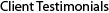
<style>
.page{position:relative;width:109px;height:13px;background:#ffffff}
.page>*{position:absolute;margin:0}
.t1{font:14px "MyriadPro-Regular";color:#000000}
</style>
<div class="page">
<p class="t1" style="left:0px;top:1px;width:109px;height:10px">Client Testimonials</p>
</div>
